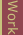
<style>
.page{position:relative;width:23px;height:35px;background:#904650}
.page>*{position:absolute;margin:0}
.t1{font:13px "Verdana";color:#c7c37d}
</style>
<div class="page">
<p class="t1" style="left:7px;top:0px;width:11px;height:35px;rotate:90deg">Work</p>
</div>
